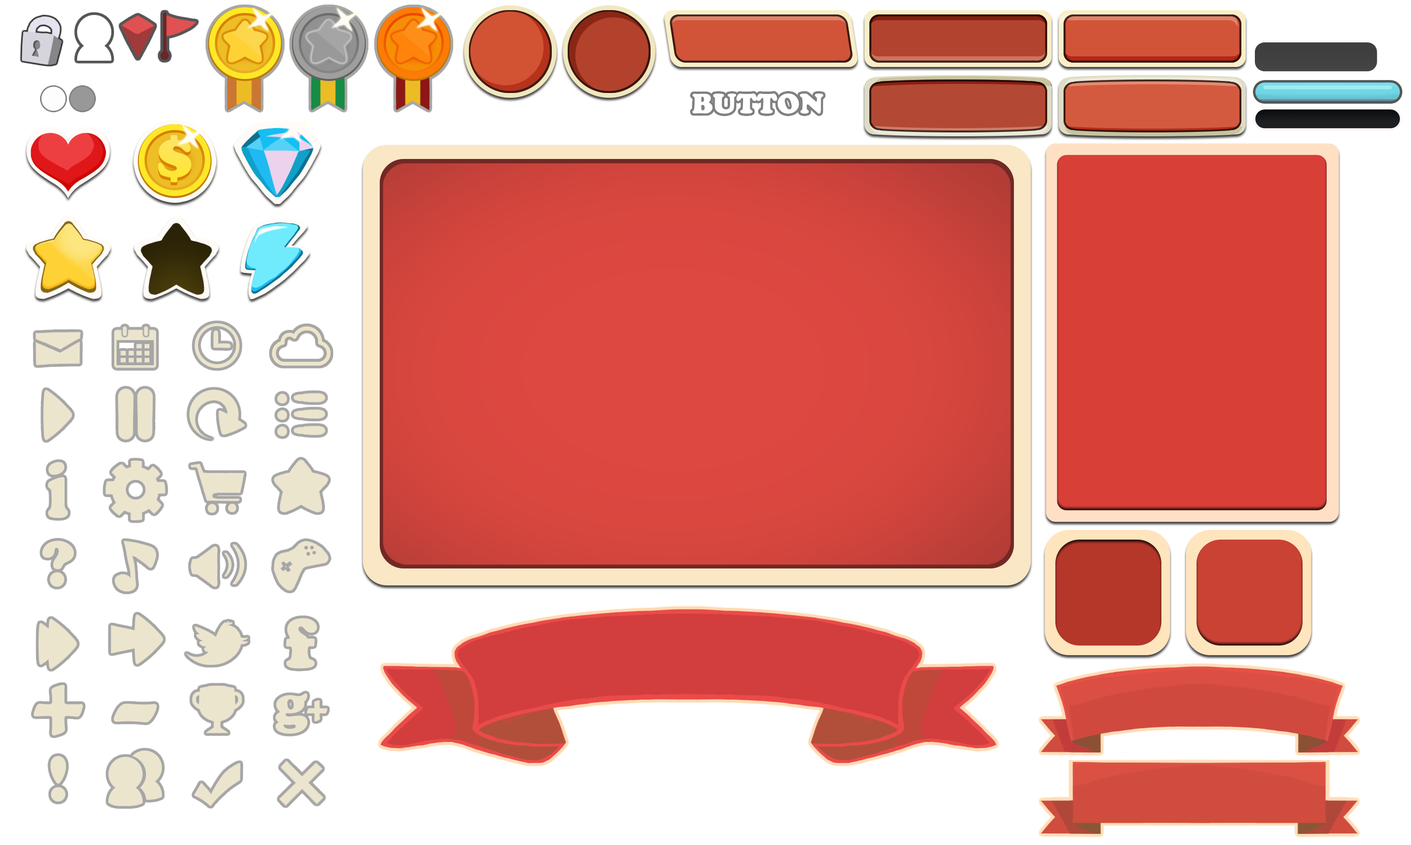
<style>
.page{position:relative;width:1411px;height:845px;background:#ffffff}
.page>*{position:absolute;margin:0}
.t1{font:28.9px "CooperBlack";color:#ffffff}
</style>
<div class="page">
<p class="t1" style="left:692px;top:93px;width:131px;height:21px">BUTTON</p>
</div>
